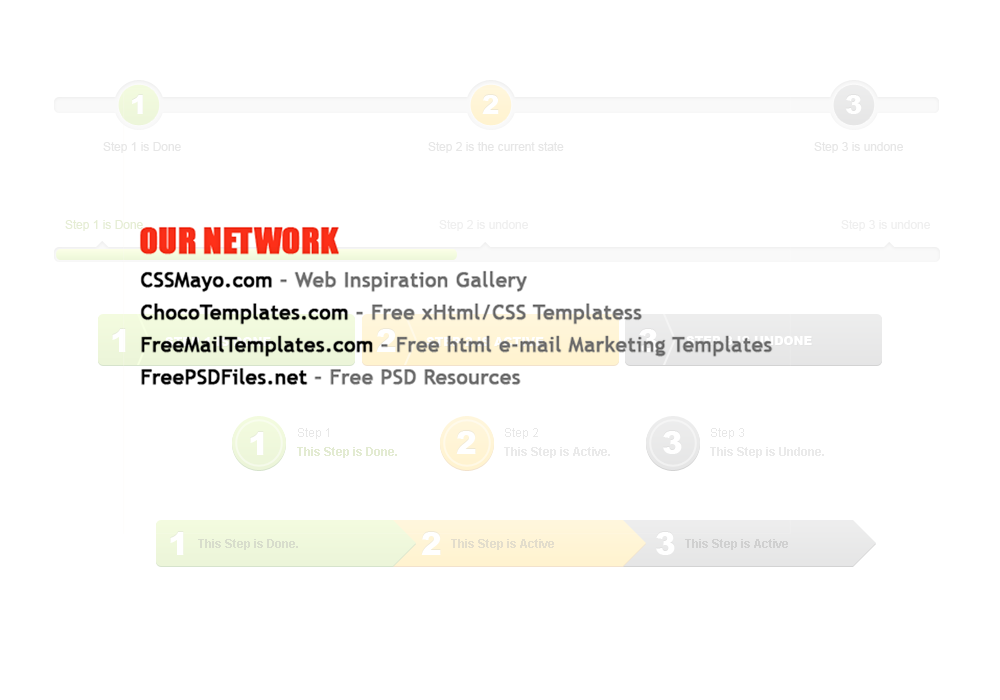
<style>
.page{position:relative;width:1000px;height:700px;background:#ffffff}
.page>*{position:absolute;margin:0}
.t1{font:26px "Arial-Black";color:#ffffff}
.t2{font:12px "ArialMT";color:#e6e6e6}
.t3{font:12px "ArialMT";color:#e5edd4}
.t4{font:12px "ArialMT";color:#efefef}
.t5{font:31px "Arial-Black";color:#ffffff;text-transform:uppercase}
.t6{font:12px "ArialMT";color:#e8e8e8}
.t7{font:12px "Arial-BoldMT";color:#e3ebd2}
.t8{font:12px "Arial-BoldMT";color:#eaeaea}
.t9{font:12px "Arial-BoldMT";color:#d8ddcc}
.t10{font:12px "Arial-BoldMT";color:#e3ddcc}
.t11{font:12px "Arial-BoldMT";color:#d0d0d0}
</style>
<div class="page">
<p class="t1" style="left:132px;top:95px;width:11px;height:19px">1</p>
<p class="t1" style="left:482px;top:95px;width:17px;height:19px">2</p>
<p class="t1" style="left:845px;top:95px;width:17px;height:19px">3</p>
<p class="t2" style="left:103px;top:142px;width:78px;height:11px">Step 1 is Done</p>
<p class="t2" style="left:428px;top:142px;width:136px;height:11px">Step 2 is the current state</p>
<p class="t2" style="left:814px;top:142px;width:89px;height:11px">Step 3 is undone</p>
<p class="t3" style="left:65px;top:220px;width:78px;height:11px">Step 1 is Done</p>
<p class="t4" style="left:439px;top:220px;width:89px;height:11px">Step 2 is undone</p>
<p class="t4" style="left:841px;top:220px;width:89px;height:11px">Step 3 is undone</p>
<p class="t5" style="left:112px;top:329px;width:14px;height:23px">1</p>
<p class="t5" style="left:376px;top:329px;width:20px;height:23px">2</p>
<p class="t5" style="left:250px;top:432px;width:14px;height:23px">1</p>
<p class="t6" style="left:298px;top:428px;width:31px;height:11px">Step 1</p>
<p class="t5" style="left:456px;top:431px;width:20px;height:23px">2</p>
<p class="t6" style="left:505px;top:428px;width:33px;height:11px">Step 2</p>
<p class="t5" style="left:663px;top:431px;width:19px;height:23px">3</p>
<p class="t6" style="left:711px;top:428px;width:33px;height:11px">Step 3</p>
<p class="t7" style="left:297px;top:447px;width:100px;height:11px">This Step is Done.</p>
<p class="t8" style="left:504px;top:447px;width:106px;height:11px">This Step is Active.</p>
<p class="t8" style="left:710px;top:447px;width:114px;height:11px">This Step is Undone.</p>
<p class="t5" style="left:170px;top:532px;width:14px;height:23px">1</p>
<p class="t5" style="left:421px;top:532px;width:20px;height:23px">2</p>
<p class="t5" style="left:656px;top:532px;width:19px;height:23px">3</p>
<p class="t9" style="left:198px;top:539px;width:100px;height:11px">This Step is Done.</p>
<p class="t10" style="left:451px;top:539px;width:103px;height:11px">This Step is Active</p>
<p class="t11" style="left:685px;top:539px;width:103px;height:11px">This Step is Active</p>
</div>
